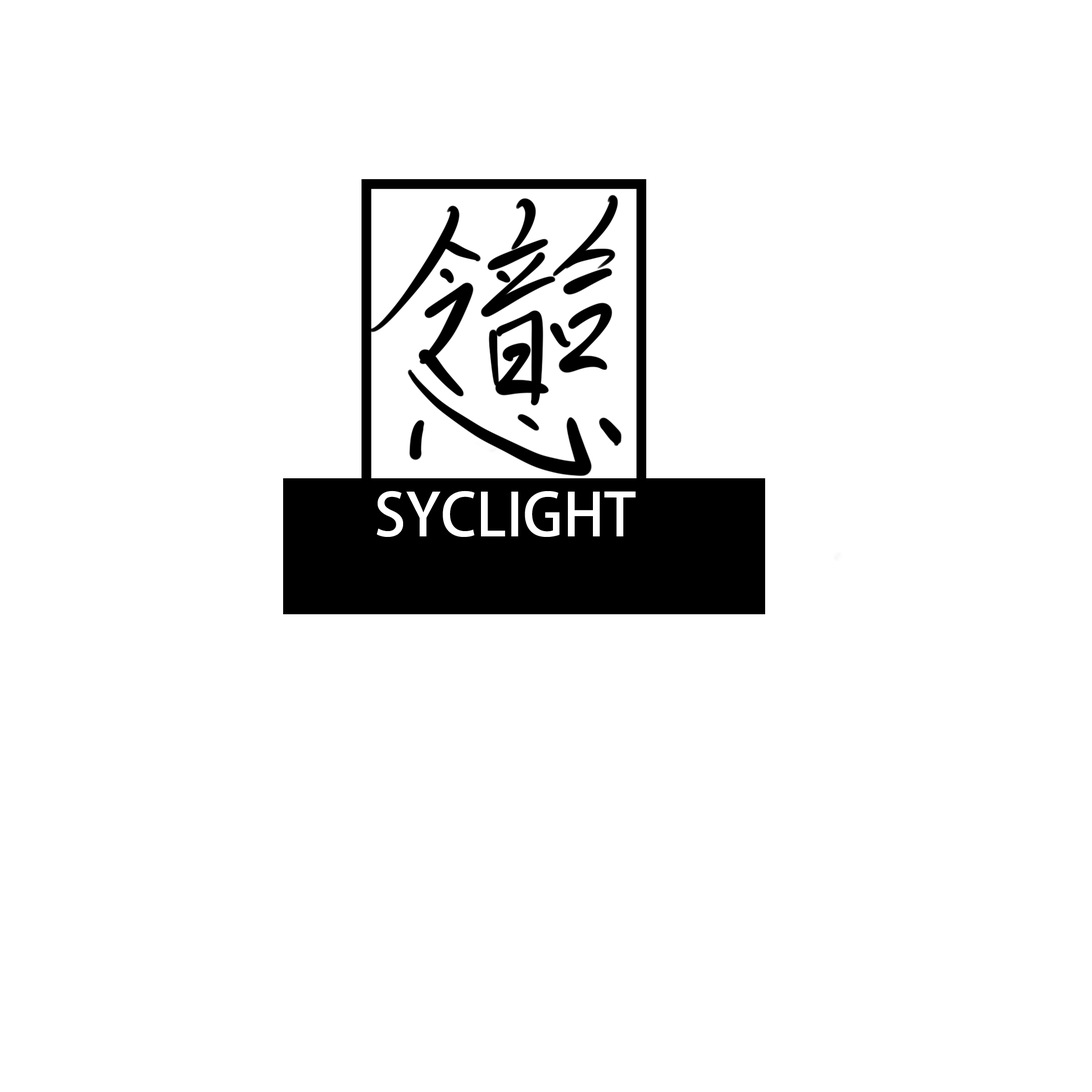
<style>
.page{position:relative;width:1092px;height:1092px;background:#ffffff}
.page>*{position:absolute;margin:0}
.t1{font:58.7px "AdobeHeitiStd-Regular";color:#ffffff}
</style>
<div class="page">
<p class="t1" style="left:376px;top:491px;width:260px;height:46px">SYCLIGHT</p>
</div>
